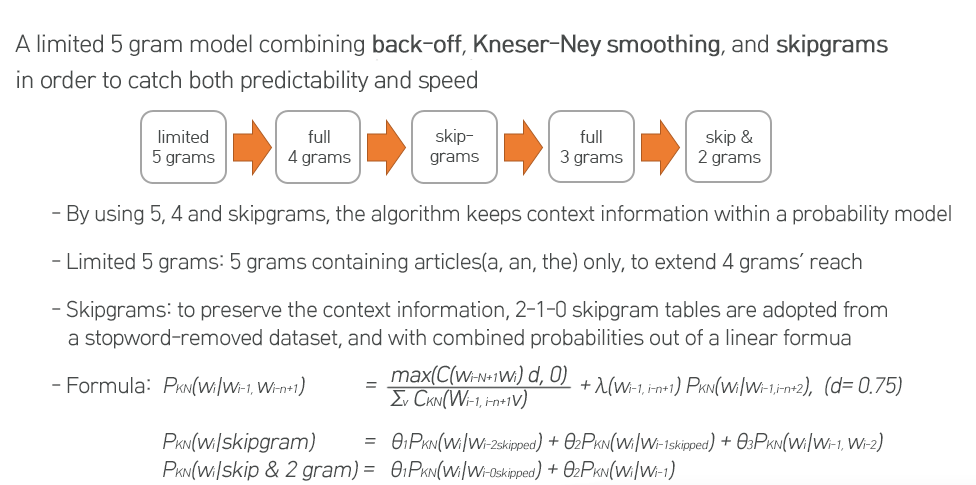
<style>
.page{position:relative;width:976px;height:485px;background:#ffffff}
.page>*{position:absolute;margin:0}
.t1{font:24px/36px "HCRDotum";letter-spacing:-0.05em;color:#474a4a}
.t2{font:24px/36px "HCRDotum";letter-spacing:-0.05em;color:#474a4a;font-weight:bold}
.t3{font:18px/20px "HCRDotum";letter-spacing:-0.05em;color:#474a4a}
.t4{font:22px/48px "HCRDotum";letter-spacing:-0.05em;color:#474a4a}
.t5{font:22px/28px "HCRDotum";letter-spacing:-0.05em;color:#474a4a}
.t6{font:22px/28px "HCRDotum";letter-spacing:-0.05em;color:#474a4a;font-style:italic}
.t7{font:12px/28px "HCRDotum";letter-spacing:-0.05em;color:#474a4a;font-style:italic}
</style>
<div class="page">
<p class="t1" style="left:15px;top:34px;width:873px;height:58px">A limited 5 gram model combining <span class="t2">back-off</span>, <span class="t2">Kneser-Ney smoothing</span>, and <span class="t2">skipgrams<br></span>in order to catch both predictability and speed</p>
<p class="t3" style="left:152px;top:130px;width:63px;height:36px;text-align:center">limited<br>5 grams</p>
<p class="t3" style="left:288px;top:130px;width:63px;height:36px;text-align:center">full<br>4 grams</p>
<p class="t3" style="left:430px;top:129px;width:49px;height:36px;text-align:center">skip-<br>grams</p>
<p class="t3" style="left:560px;top:130px;width:63px;height:36px;text-align:center">full<br>3 grams</p>
<p class="t3" style="left:698px;top:130px;width:63px;height:36px;text-align:center">skip &amp;<br>2 grams</p>
<p class="t4" style="left:52px;top:205px;width:899px;height:276px"><span class="t5">- By using 5, 4 and skipgrams, the algorithm keeps context information </span>within a probability model<br>- Limited 5 grams: 5 grams containing articles(a, an, the) only, to extend 4 grams’ reach<br><span class="t5">- Skipgrams: to preserve the context information, 2-1-0 skipgram tables are adopted from<br></span>   a stopword-removed dataset, and with combined probabilities out of a linear formua<br><span class="t5">- Formula:  </span><span class="t6">P</span><span class="t7">KN</span><span class="t6">(w</span><span class="t7">i</span><span class="t6">|w</span><span class="t7">i-1, </span><span class="t6">w</span><span class="t7">i-n+1</span><span class="t6">)           =                                     + λ(w</span><span class="t7">i-1, i-n+1</span><span class="t6">) P</span><span class="t7">KN</span><span class="t6">(w</span><span class="t7">i</span><span class="t6">|w</span><span class="t7">i-1,i-n+2</span><span class="t6">),  (d= 0.75) <br><br>                    P</span><span class="t7">KN</span><span class="t6">(w</span><span class="t7">i</span><span class="t6">|skipgram)         =   θ</span><span class="t7">1</span><span class="t6">P</span><span class="t7">KN</span><span class="t6">(w</span><span class="t7">i</span><span class="t6">|w</span><span class="t7">i-2skipped</span><span class="t6">) + θ</span><span class="t7">2</span><span class="t6">P</span><span class="t7">KN</span><span class="t6">(w</span><span class="t7">i</span><span class="t6">|w</span><span class="t7">i-1skipped</span><span class="t6">) + θ</span><span class="t7">3</span><span class="t6">P</span><span class="t7">KN</span><span class="t6">(w</span><span class="t7">i</span><span class="t6">|w</span><span class="t7">i-1, </span><span class="t6">w</span><span class="t7">i-2</span><span class="t6">) <br>                    P</span><span class="t7">KN</span><span class="t6">(w</span><span class="t7">i</span><span class="t6">|skip &amp; 2 gram) =   θ</span><span class="t7">1</span><span class="t6">P</span><span class="t7">KN</span><span class="t6">(w</span><span class="t7">i</span><span class="t6">|w</span><span class="t7">i-0skipped</span><span class="t6">) + θ</span><span class="t7">2</span><span class="t6">P</span><span class="t7">KN</span><span class="t6">(w</span><span class="t7">i</span><span class="t6">|w</span><span class="t7">i-1</span><span class="t6">)</span></p>
</div>
